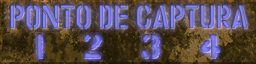
<style>
.page{position:relative;width:256px;height:64px}
.page>*{position:absolute;margin:0}
.t1{font:33.3px "ArugulaDAF20231006-Regular";letter-spacing:-0.015em;text-transform:uppercase}
</style>
<div class="page">
<p class="t1" style="left:10px;top:4px;width:237px;height:24px">ponto de captura</p>
</div>
